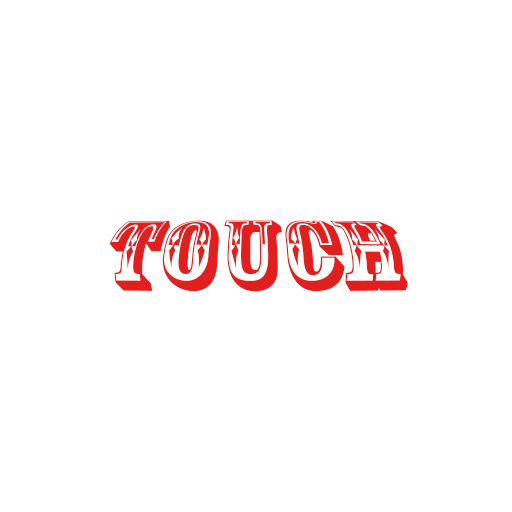
<style>
.page{position:relative;width:512px;height:512px;background:#ffffff}
.page>*{position:absolute;margin:0}
.t1{font:80px "RosewoodStd-Regular";color:#e11f1f}
</style>
<div class="page">
<p class="t1" style="left:109px;top:220px;width:299px;height:72px">Touch</p>
</div>
